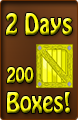
<style>
.page{position:relative;width:78px;height:120px}
.page>*{position:absolute;margin:0}
.t1{font:26.4px "HoboStd";scale:0.83 1}
.t2{font:25.2px "HoboStd";scale:0.83 1}
.t3{font:19.2px "HoboStd";scale:0.83 1}
</style>
<div class="page">
<p class="t1" style="left:6px;top:13px;width:66px;height:22px">2 Days</p>
<p class="t2" style="left:7px;top:67px;width:63px;height:46px"><span class="t3">200 <br></span>Boxes!</p>
</div>
